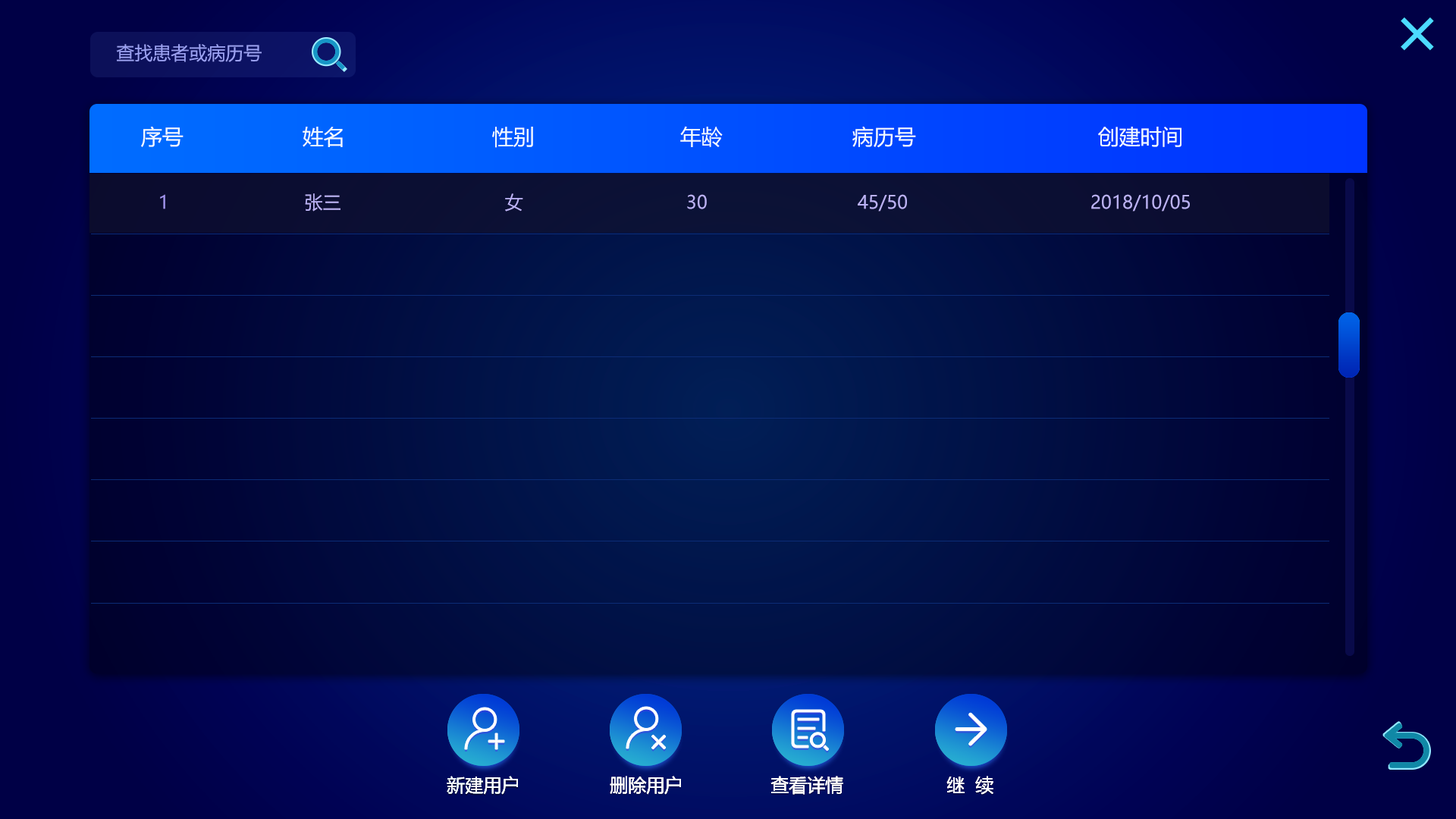
<style>
.page{position:relative;width:1456px;height:819px}
.page>*{position:absolute;margin:0}
.t1{font:49.8px "SourceHanSansCN-Bold";letter-spacing:0.05em;color:#4cdbff}
.t2{font:18.2px "MicrosoftYaHei";color:#9ba1f3}
.t3{font:21.2px "MicrosoftYaHei";color:#f2fbff}
.t4{font:18.2px "MicrosoftYaHei";color:#a194ef}
.t5{font:18.2px "MicrosoftYaHei";color:#bab1f4}
.t6{font:18.2px "MicrosoftYaHei";color:#ffffff}
</style>
<div class="page">
<p class="t1" style="left:1401px;top:17px;width:33px;height:34px">×</p>
<p class="t2" style="left:116px;top:44px;width:146px;height:18px">查找患者或病历号</p>
<p class="t3" style="left:141px;top:126px;width:43px;height:21px">序号</p>
<p class="t3" style="left:680px;top:126px;width:43px;height:21px">年龄</p>
<p class="t3" style="left:852px;top:126px;width:64px;height:22px">病历号</p>
<p class="t3" style="left:303px;top:127px;width:40px;height:20px">姓名</p>
<p class="t3" style="left:492px;top:127px;width:41px;height:21px">性别</p>
<p class="t3" style="left:1098px;top:127px;width:83px;height:20px">创建时间</p>
<p class="t4" style="left:160px;top:194px;width:5px;height:15px">1</p>
<p class="t5" style="left:305px;top:193px;width:35px;height:19px">张三</p>
<p class="t5" style="left:505px;top:193px;width:18px;height:19px">女</p>
<p class="t5" style="left:687px;top:194px;width:20px;height:15px">30</p>
<p class="t5" style="left:858px;top:194px;width:49px;height:18px">45/50</p>
<p class="t5" style="left:1091px;top:194px;width:99px;height:18px">2018/10/05</p>
<p class="t6" style="left:447px;top:776px;width:71px;height:19px">新建用户</p>
<p class="t6" style="left:447px;top:776px;width:71px;height:19px">新建用户</p>
<p class="t6" style="left:447px;top:776px;width:71px;height:19px">新建用户</p>
<p class="t6" style="left:610px;top:776px;width:71px;height:19px">删除用户</p>
<p class="t6" style="left:610px;top:776px;width:71px;height:19px">删除用户</p>
<p class="t6" style="left:610px;top:776px;width:71px;height:19px">删除用户</p>
<p class="t6" style="left:770px;top:776px;width:73px;height:19px">查看详情</p>
<p class="t6" style="left:770px;top:776px;width:73px;height:19px">查看详情</p>
<p class="t6" style="left:770px;top:776px;width:73px;height:19px">查看详情</p>
<p class="t6" style="left:946px;top:776px;width:47px;height:19px">继  续</p>
<p class="t6" style="left:946px;top:776px;width:47px;height:19px">继  续</p>
<p class="t6" style="left:946px;top:776px;width:47px;height:19px">继  续</p>
</div>
